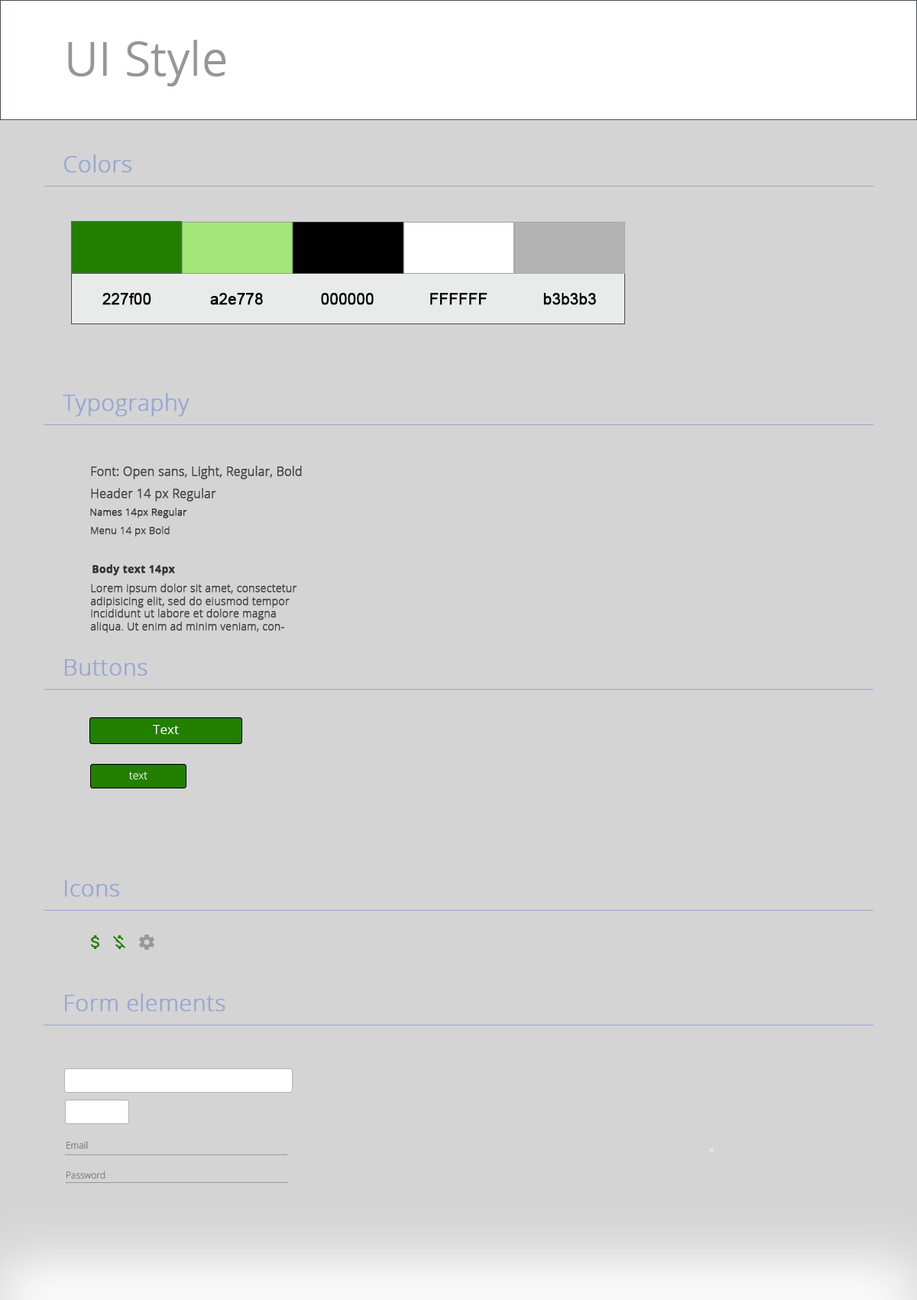
<style>
.page{position:relative;width:917px;height:1300px;background:#d4d4d4}
.page>*{position:absolute;margin:0}
.t1{font:45.9px "OpenSans-Light";color:#969696;font-weight:bold}
.t2{font:22.9px "OpenSans-Light";color:#98a7d4;font-weight:bold}
.t3{font:15.3px "ArialMT";color:#000000;font-weight:bold}
.t4{font:12.2px "OpenSans-Light";color:#454545;font-weight:bold}
.t5{font:9.9px "OpenSans-Light";color:#333333;font-weight:bold}
.t6{font:9.9px "OpenSans-Light";color:#454545;font-weight:bold}
.t7{font:10.7px "OpenSans-Bold";color:#333333;font-weight:bold}
.t8{font:10.7px "OpenSans-Light";color:#454545;font-weight:bold}
</style>
<div class="page">
<p class="t1" style="left:68px;top:40px;width:158px;height:46px">UI Style</p>
<p class="t2" style="left:63px;top:154px;width:69px;height:19px">Colors</p>
<p class="t3" style="left:102px;top:293px;width:49px;height:12px">227f00</p>
<p class="t3" style="left:210px;top:293px;width:53px;height:12px">a2e778</p>
<p class="t3" style="left:321px;top:293px;width:53px;height:12px">000000</p>
<p class="t3" style="left:430px;top:293px;width:58px;height:12px">FFFFFF</p>
<p class="t3" style="left:544px;top:293px;width:52px;height:12px">b3b3b3</p>
<p class="t2" style="left:63px;top:393px;width:127px;height:24px">Typography</p>
<p class="t4" style="left:91px;top:466px;width:211px;height:13px">Font: Open sans, Light, Regular, Bold</p>
<p class="t4" style="left:91px;top:488px;width:125px;height:14px">Header 14 px Regular</p>
<p class="t5" style="left:90px;top:508px;width:97px;height:10px">Names 14px Regular</p>
<p class="t6" style="left:91px;top:526px;width:79px;height:11px">Menu 14 px Bold</p>
<p class="t7" style="left:93px;top:564px;width:82px;height:12px">Body text 14px</p>
<p class="t8" style="left:90px;top:583px;width:207px;height:50px">Lorem ipsum dolor sit amet, consectetur adipisicing elit, sed do eiusmod tempor incididunt ut labore et dolore magna aliqua. Ut enim ad minim veniam, consectetur.</p>
<p class="t2" style="left:65px;top:659px;width:83px;height:17px">Buttons</p>
<p class="t2" style="left:65px;top:880px;width:54px;height:17px">Icons</p>
<p class="t2" style="left:65px;top:993px;width:161px;height:18px">Form elements</p>
</div>
